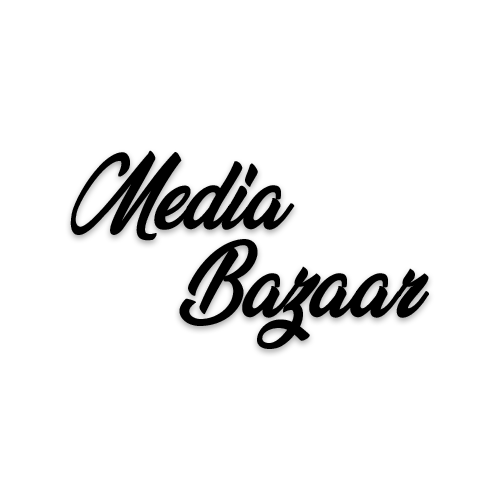
<style>
.page{position:relative;width:500px;height:500px;background:#ffffff}
.page>*{position:absolute;margin:0}
.t1{font:73.6px "VeganStylePersonalUse";color:#000000;scale:0.96 1}
</style>
<div class="page">
<p class="t1" style="left:70px;top:150px;width:359px;height:199px">Media<br>  Bazaar</p>
</div>
